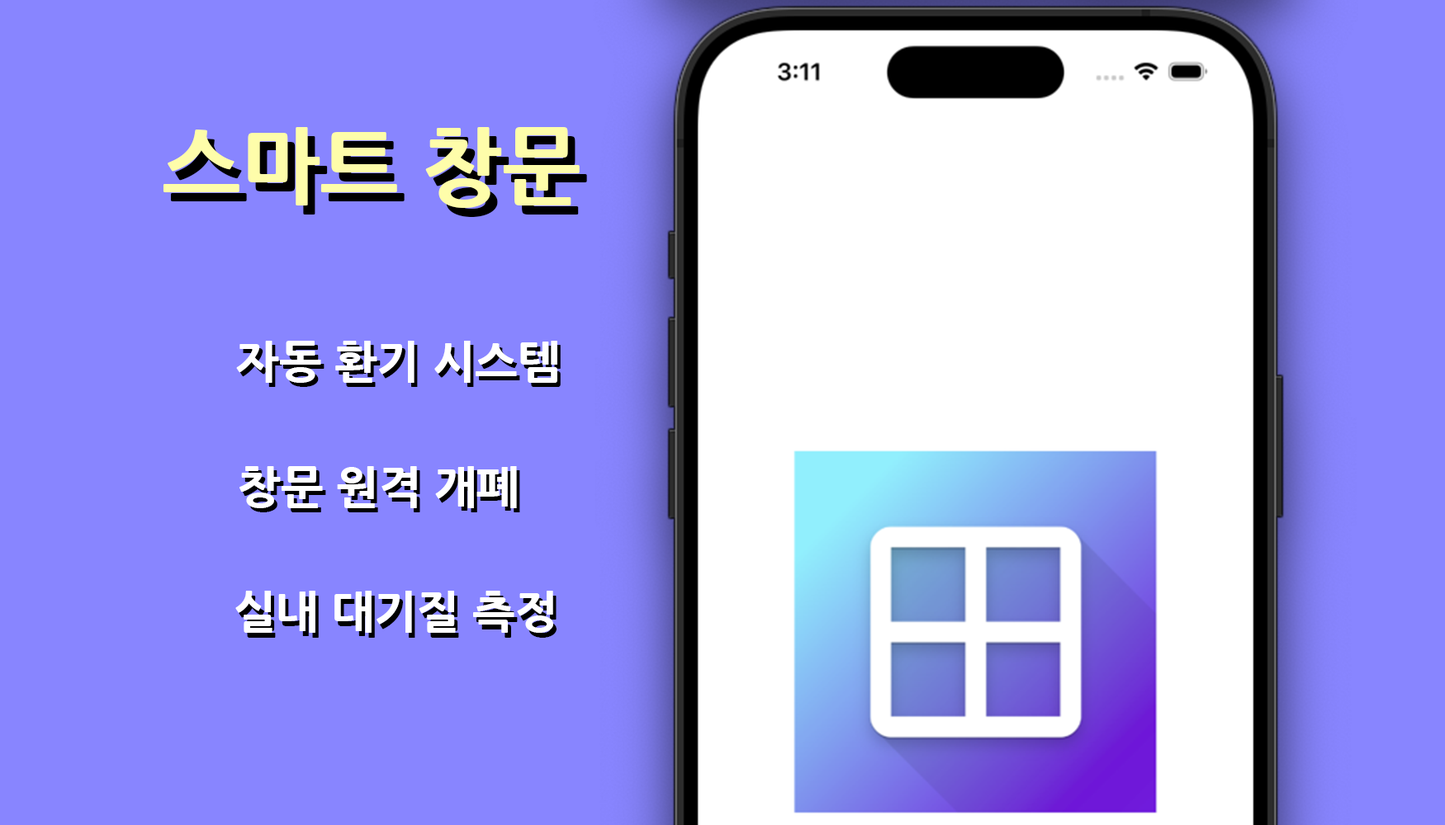
<style>
.page{position:relative;width:1445px;height:825px;background:#8885ff}
.page>*{position:absolute;margin:0}
.t1{font:84.2px "NanumGothicExtraBold";color:#fefdaa}
.t2{font:84.2px "NanumGothicExtraBold";color:#000000}
.t3{font:45.4px "NanumGothicExtraBold";color:#ffffff}
.t4{font:45.4px "NanumGothicExtraBold"}
</style>
<div class="page">
<p class="t1" style="left:163px;top:127px;width:416px;height:81px">스마트 창문</p>
<p class="t2" style="left:170px;top:136px;width:417px;height:81px">스마트 창문</p>
<p class="t3" style="left:236px;top:341px;width:321px;height:42px">자동 환기 시스템</p>
<p class="t4" style="left:239px;top:345px;width:321px;height:42px">자동 환기 시스템</p>
<p class="t3" style="left:239px;top:466px;width:278px;height:42px">창문 원격 개폐</p>
<p class="t4" style="left:243px;top:471px;width:277px;height:42px">창문 원격 개폐</p>
<p class="t3" style="left:235px;top:591px;width:318px;height:42px">실내 대기질 측정</p>
<p class="t4" style="left:239px;top:596px;width:317px;height:42px">실내 대기질 측정</p>
</div>
